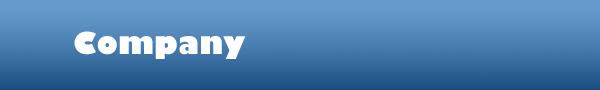
<style>
.page{position:relative;width:600px;height:90px}
.page>*{position:absolute;margin:0}
.t1{font:30px "GillSans-UltraBold";color:#ffffff}
</style>
<div class="page">
<p class="t1" style="left:74px;top:31px;width:172px;height:28px">Company</p>
</div>
